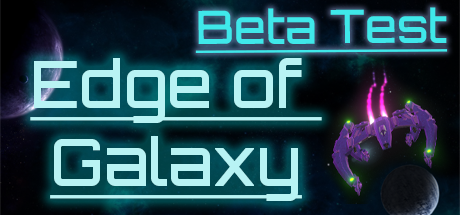
<style>
.page{position:relative;width:460px;height:215px}
.page>*{position:absolute;margin:0}
.t1{font:46px "Orbitron-Medium";color:#40eaec;text-decoration:underline}
.t2{font:65px "Orbitron-Medium";color:#b8f3f4;text-decoration:underline}
</style>
<div class="page">
<p class="t1" style="left:195px;top:7px;width:253px;height:46px">Beta Test</p>
<p class="t2" style="left:30px;top:58px;width:292px;height:143px;text-align:center">Edge of <br>Galaxy</p>
</div>
